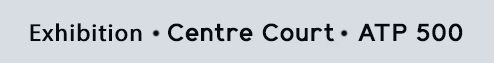
<style>
.page{position:relative;width:494px;height:63px;background:#d8dde3}
.page>*{position:absolute;margin:0}
.t1{font:24.5px "MyriadPro-Regular";letter-spacing:0.025em;color:#050a11;font-weight:bold}
.t2{font:24.5px "ElliotSans-Medium";letter-spacing:0.025em;color:#050a11;font-weight:bold}
</style>
<div class="page">
<p class="t1" style="left:30px;top:23px;width:112px;height:19px">Exhibition</p>
<p class="t2" style="left:168px;top:23px;width:167px;height:19px">Centre Court</p>
<p class="t2" style="left:358px;top:23px;width:105px;height:19px">ATP 500</p>
</div>
